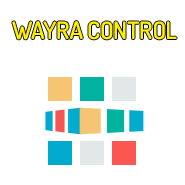
<style>
.page{position:relative;width:185px;height:185px;background:#ffffff}
.page>*{position:absolute;margin:0}
.t1{font:24px "Dosis-SemiBold";letter-spacing:-0.01em;color:#feee00;text-transform:uppercase}
</style>
<div class="page">
<p class="t1" style="left:12px;top:21px;width:165px;height:19px">WAYRA CONTROL</p>
</div>
